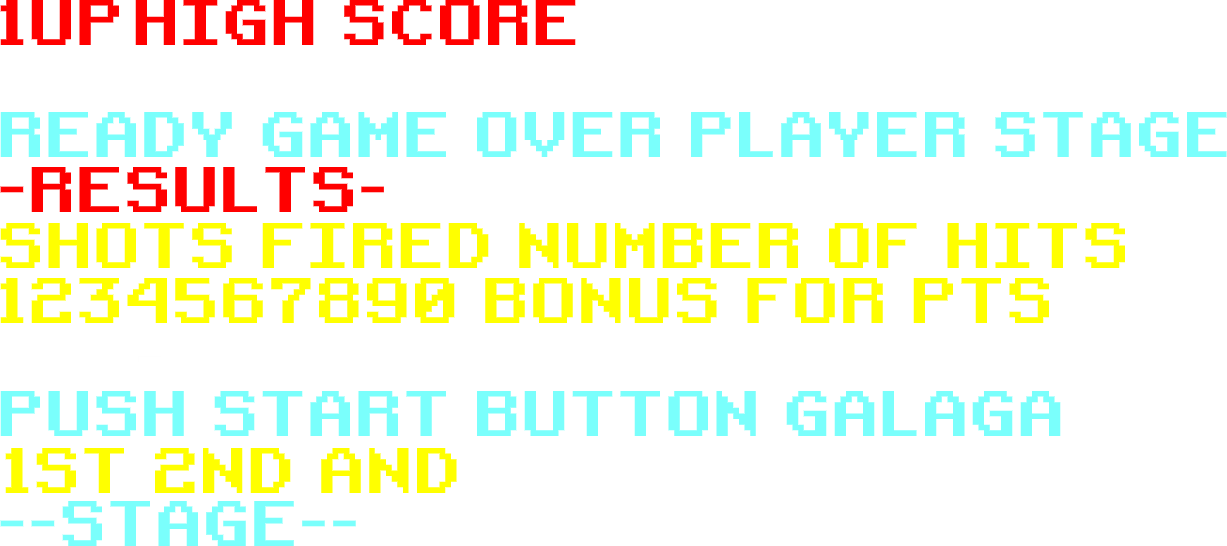
<style>
.page{position:relative;width:1227px;height:546px;background:#ffffff}
.page>*{position:absolute;margin:0}
.t1{font:62px "RetroGaming";color:#ff0000}
.t2{font:62px "RetroGaming";color:#7afffc}
.t3{font:62px "RetroGaming";color:#ffff00}
</style>
<div class="page">
<p class="t1" style="left:0px;top:0px;width:119px;height:45px">1UP</p>
<p class="t1" style="left:135px;top:0px;width:441px;height:45px">HIGH SCORE</p>
<p class="t2" style="left:0px;top:111px;width:1227px;height:46px">READY GAME OVER PLAYER STAGE</p>
<p class="t1" style="left:0px;top:166px;width:384px;height:46px">-RESULTS-</p>
<p class="t3" style="left:0px;top:222px;width:1126px;height:46px">SHOTS FIRED NUMBER OF HITS</p>
<p class="t3" style="left:0px;top:277px;width:1049px;height:46px">1234567890 BONUS FOR PTS</p>
<p class="t2" style="left:0px;top:390px;width:1061px;height:46px">PUSH START BUTTON GALAGA</p>
<p class="t3" style="left:5px;top:447px;width:452px;height:46px">1ST 2ND AND</p>
<p class="t2" style="left:0px;top:500px;width:356px;height:46px">--STAGE--</p>
</div>
